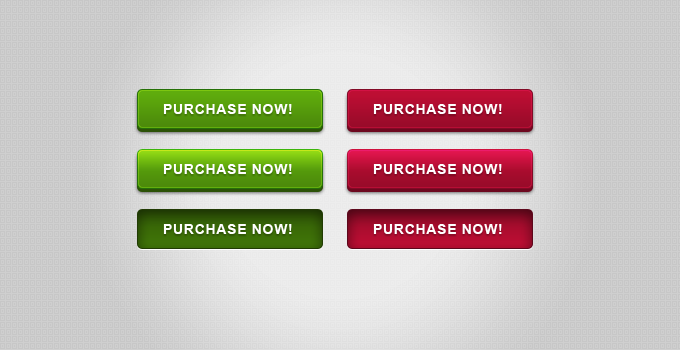
<style>
.page{position:relative;width:680px;height:350px}
.page>*{position:absolute;margin:0}
.t1{font:14px "Arial-BoldMT";letter-spacing:0.05em;color:#ffffff;text-transform:uppercase}
</style>
<div class="page">
<p class="t1" style="left:163px;top:104px;width:129px;height:10px">Purchase now!</p>
<p class="t1" style="left:373px;top:104px;width:129px;height:10px">Purchase now!</p>
<p class="t1" style="left:163px;top:164px;width:129px;height:10px">Purchase now!</p>
<p class="t1" style="left:373px;top:164px;width:129px;height:10px">Purchase now!</p>
<p class="t1" style="left:163px;top:224px;width:129px;height:10px">Purchase now!</p>
<p class="t1" style="left:373px;top:224px;width:129px;height:10px">Purchase now!</p>
</div>
